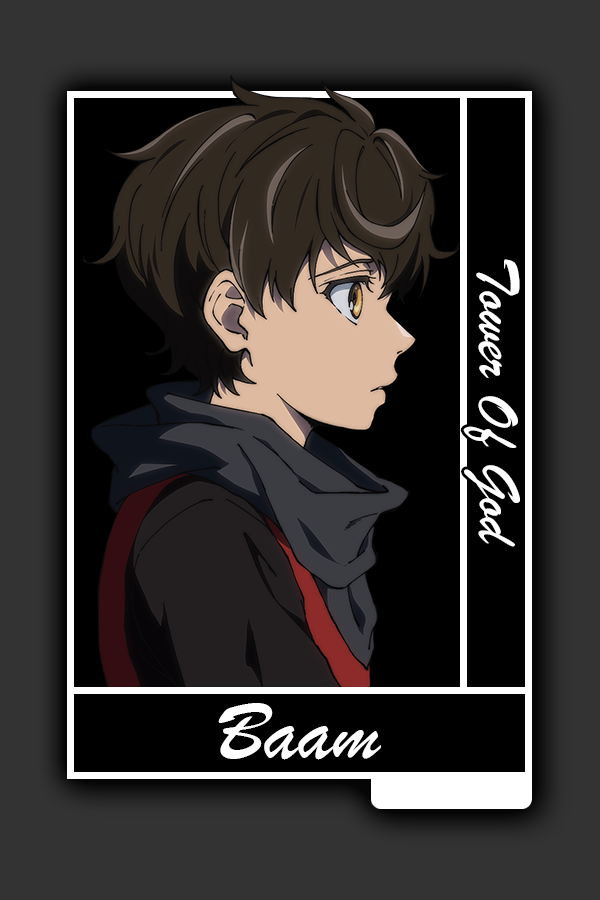
<style>
.page{position:relative;width:600px;height:900px;background:#000000}
.page>*{position:absolute;margin:0}
.t1{font:61.5px "BrushScriptMT";color:#ffffff}
.t2{font:84.8px "BrushScriptMT";color:#ffffff}
</style>
<div class="page">
<p class="t1" style="left:463px;top:259px;width:57px;height:288px;rotate:90deg">Tower Of God</p>
<p class="t2" style="left:218px;top:703px;width:163px;height:57px">Baam</p>
</div>
